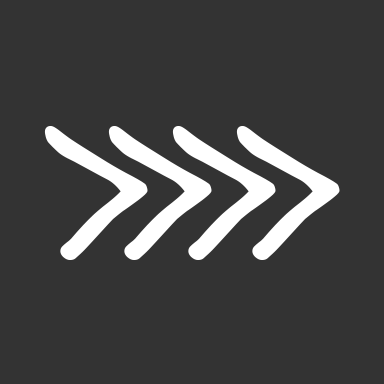
<style>
.page{position:relative;width:384px;height:384px;background:#333333}
.page>*{position:absolute;margin:0}
.t1{font:234px "SegoeScript";letter-spacing:-0.3em;color:#ffffff}
</style>
<div class="page">
<p class="t1" style="left:44px;top:126px;width:296px;height:134px">&gt;&gt;&gt;&gt;</p>
</div>
